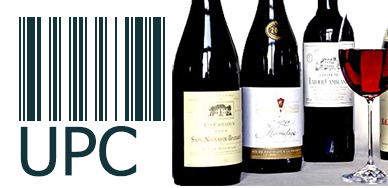
<style>
.page{position:relative;width:388px;height:188px;background:#ffffff}
.page>*{position:absolute;margin:0}
.t1{font:66.7px "Tahoma";color:#14343b}
</style>
<div class="page">
<p class="t1" style="left:20px;top:126px;width:117px;height:51px">UPC</p>
</div>
